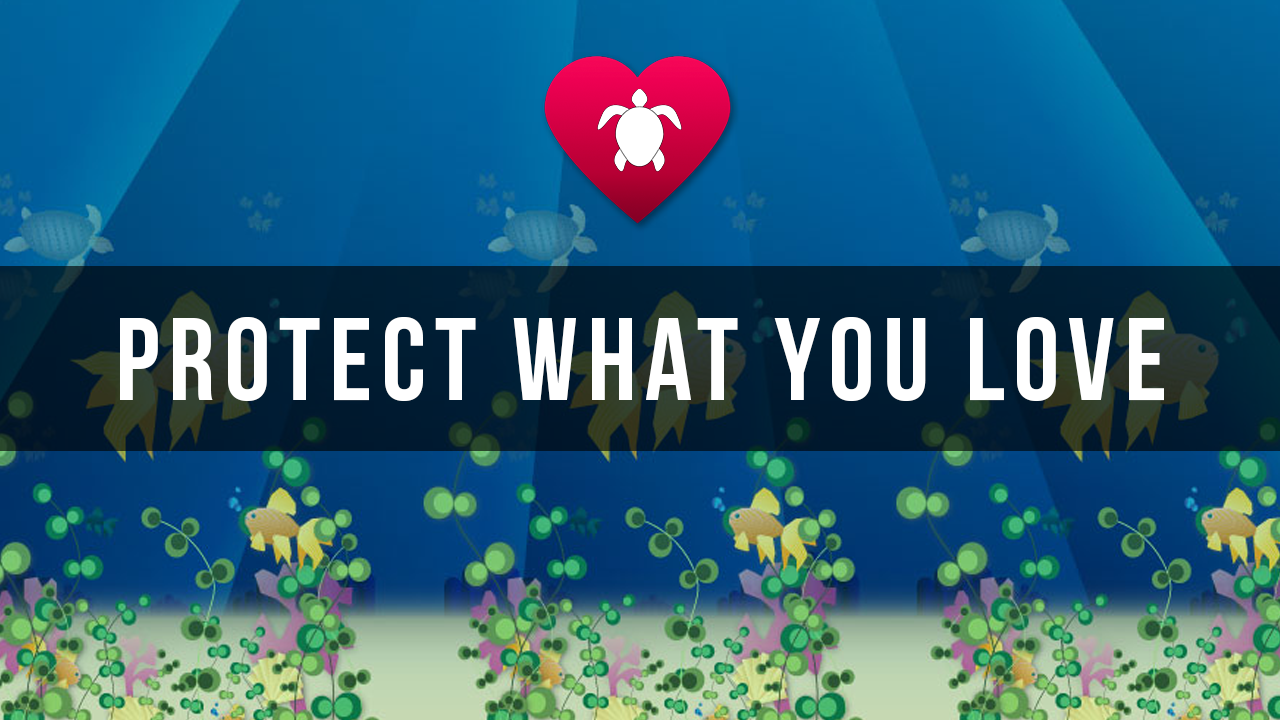
<style>
.page{position:relative;width:1280px;height:720px}
.page>*{position:absolute;margin:0}
.t1{font:116.9px "BebasNeue";letter-spacing:0.075em;color:#ffffff}
</style>
<div class="page">
<p class="t1" style="left:120px;top:317px;width:1044px;height:85px">Protect What You Love</p>
</div>
